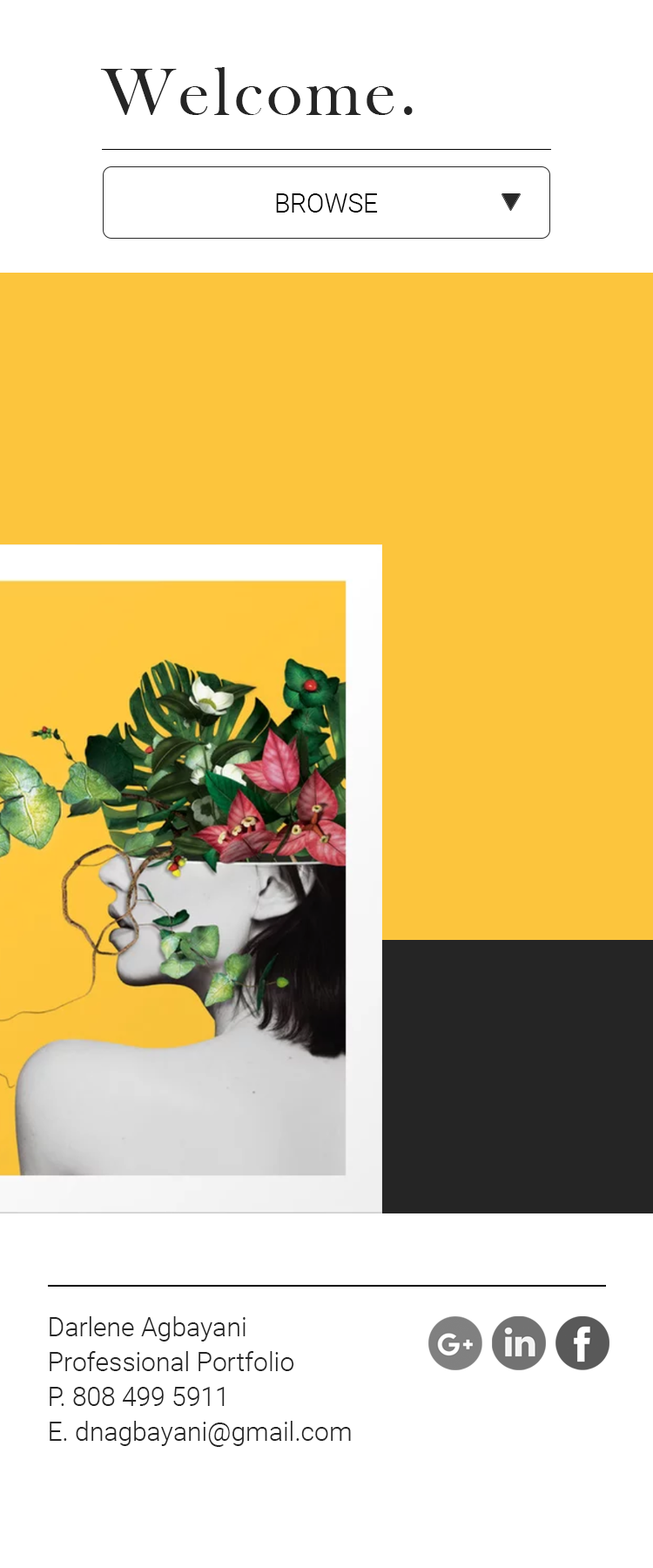
<style>
.page{position:relative;width:653px;height:1568px;background:#ffffff}
.page>*{position:absolute;margin:0}
.t1{font:69.7px "BaskOldFace";letter-spacing:0.05em;color:#252525}
.t2{font:26.1px "Roboto-Light";color:#000000}
.t3{font:26.1px/34.8px "Roboto-Light";color:#252525}
</style>
<div class="page">
<p class="t1" style="left:100px;top:67px;width:313px;height:48px">Welcome.</p>
<p class="t2" style="left:276px;top:193px;width:102px;height:20px">BROWSE</p>
<p class="t3" style="left:50px;top:1316px;width:301px;height:131px">Darlene Agbayani<br>Professional Portfolio<br>P. 808 499 5911<br>E. dnagbayani@gmail.com</p>
</div>
